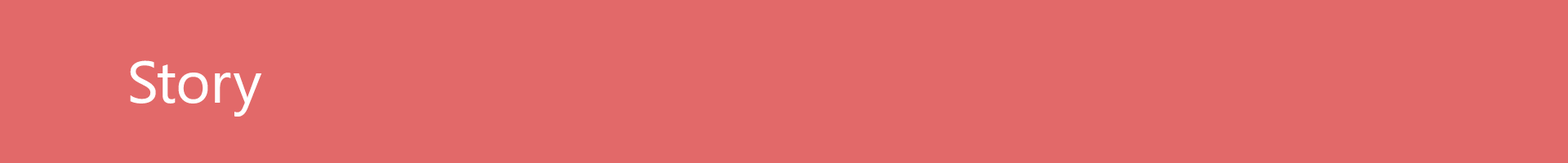
<style>
.page{position:relative;width:1568px;height:163px;background:#e26969}
.page>*{position:absolute;margin:0}
.t1{font:58.8px "LeelawadeeUI";color:#ffffff}
</style>
<div class="page">
<p class="t1" style="left:130px;top:60px;width:132px;height:57px">Story</p>
</div>
